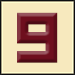
<style>
.page{position:relative;width:75px;height:75px;background:#f7e9be}
.page>*{position:absolute;margin:0}
.t1{font:67.5px "Kremlin"}
</style>
<div class="page">
<p class="t1" style="left:17px;top:12px;width:41px;height:51px">9</p>
</div>
